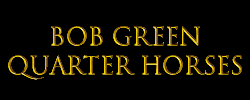
<style>
.page{position:relative;width:250px;height:100px;background:#000000}
.page>*{position:absolute;margin:0}
.t1{font:24px "TrajanColor-Concept"}
</style>
<div class="page">
<p class="t1" style="left:8px;top:26px;width:234px;height:54px;text-align:center">Bob Green<br>Quarter Horses</p>
</div>
